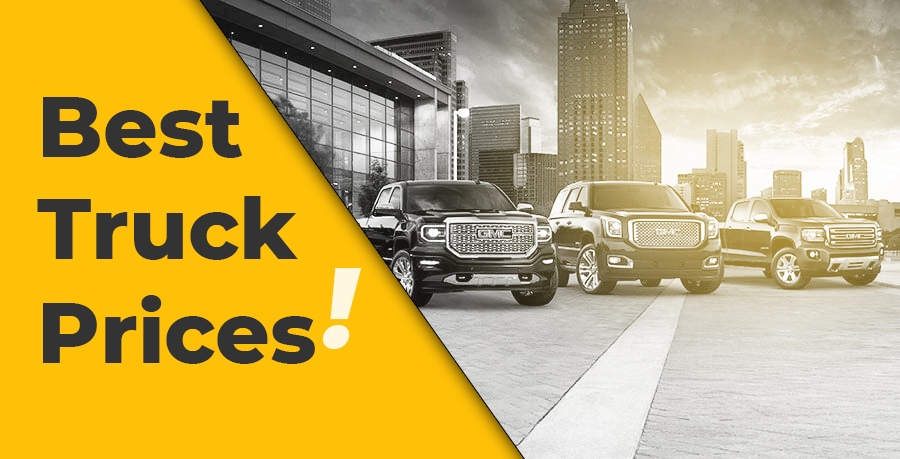
<style>
.page{position:relative;width:900px;height:459px;background:#ffc107}
.page>*{position:absolute;margin:0}
.t1{font:85.4px "Montserrat-ExtraBold";color:#333333}
.t2{font:85.4px/104px "Montserrat-ExtraBold";color:#333333}
.t3{font:113.4px/104px "Montserrat-ExtraBold";color:#fff7e0;font-style:italic}
</style>
<div class="page">
<p class="t1" style="left:37px;top:97px;width:325px;height:267px">Best<br>Truck <br><span class="t2">Prices</span><span class="t3">!</span></p>
</div>
